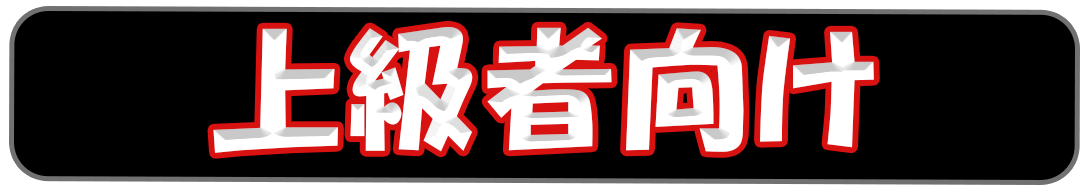
<style>
.page{position:relative;width:1089px;height:192px;background:#000000}
.page>*{position:absolute;margin:0}
.t1{font:130.2px "HGPSoeiKakupoptai";letter-spacing:0.05em;color:#ffffff}
</style>
<div class="page">
<p class="t1" style="left:213px;top:27px;width:661px;height:126px">上級者向け</p>
</div>
